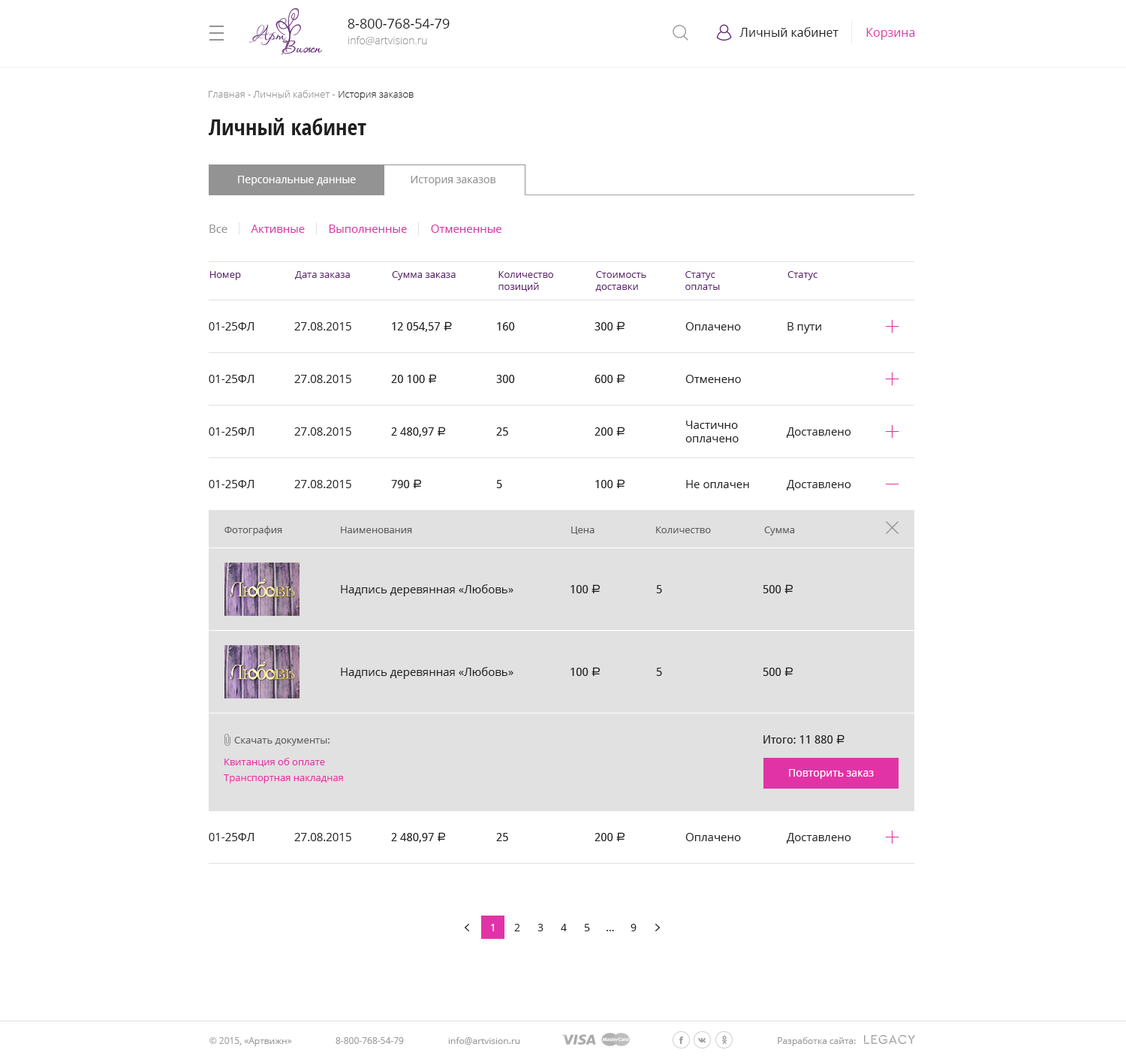
<style>
.page{position:relative;width:1126px;height:1059px;background:#ffffff}
.page>*{position:absolute;margin:0}
.t1{font:13.5px "OpenSans";color:#202020}
.t2{font:12px "OpenSans";color:#202020}
.t3{font:12px "OpenSans";color:#e233a6}
.t4{font:10.5px "OpenSans-Light";color:#999999}
.t5{font:9.8px "OpenSans-Light";color:#939393}
.t6{font:9.8px "OpenSans-Light";color:#202020}
.t7{font:22.5px "OpenSans-CondensedBold";color:#202020}
.t8{font:10.5px "OpenSans";color:#ffffff}
.t9{font:10.5px "OpenSans";color:#939393}
.t10{font:11.3px "OpenSans";color:#e233a6}
.t11{font:11.3px "OpenSans";color:#939393}
.t12{font:9.8px "OpenSans";color:#5e2670}
.t13{font:9.8px/12px "OpenSans";color:#5e2670}
.t14{font:11.3px "OpenSans";color:#202020}
.t15{font:11.3px "DroidSans";color:#202020}
.t16{font:12px "ALSRubl";color:#202020}
.t17{font:11.3px/13.5px "OpenSans";color:#202020}
.t18{font:9.8px "OpenSans";color:#5d5d5d}
.t19{font:9.8px "OpenSans";color:#e233a6}
.t20{font:10.5px "OpenSans";color:#202020}
.t21{font:9px "OpenSans";color:#9e9d9d}
</style>
<div class="page">
<p class="t1" style="left:348px;top:19px;width:102px;height:10px">8-800-768-54-79</p>
<p class="t2" style="left:740px;top:27px;width:99px;height:10px">Личный кабинет</p>
<p class="t3" style="left:866px;top:28px;width:49px;height:12px">Корзина</p>
<p class="t4" style="left:348px;top:36px;width:79px;height:9px">info@artvision.ru</p>
<p class="t5" style="left:209px;top:90px;width:205px;height:10px">Главная - Личный кабинет - <span class="t6">История заказов</span></p>
<p class="t7" style="left:209px;top:118px;width:157px;height:17px">Личный кабинет</p>
<p class="t8" style="left:238px;top:176px;width:118px;height:9px">Персональные данные</p>
<p class="t9" style="left:411px;top:176px;width:85px;height:9px">История заказов</p>
<p class="t10" style="left:209px;top:225px;width:293px;height:8px"><span class="t11">Все        </span>Активные        Выполненные        Отмененные</p>
<p class="t12" style="left:209px;top:271px;width:32px;height:9px">Номер</p>
<p class="t12" style="left:295px;top:271px;width:55px;height:8px">Дата заказа</p>
<p class="t12" style="left:392px;top:271px;width:64px;height:9px">Сумма заказа</p>
<p class="t13" style="left:499px;top:271px;width:54px;height:20px">Количество<br>позиций</p>
<p class="t13" style="left:595px;top:271px;width:51px;height:20px">Стоимость<br>доставки</p>
<p class="t13" style="left:686px;top:271px;width:34px;height:19px">Статус <br>оплаты</p>
<p class="t12" style="left:788px;top:271px;width:30px;height:9px">Статус</p>
<p class="t14" style="left:209px;top:322px;width:45px;height:8px">01-25ФЛ</p>
<p class="t14" style="left:294px;top:322px;width:57px;height:8px">27.08.2015</p>
<p class="t15" style="left:392px;top:321px;width:60px;height:11px">12 054,57 <span class="t16">a</span></p>
<p class="t15" style="left:497px;top:322px;width:18px;height:8px">160</p>
<p class="t15" style="left:595px;top:321px;width:30px;height:9px">300 <span class="t16">a</span></p>
<p class="t14" style="left:686px;top:322px;width:55px;height:8px">Оплачено</p>
<p class="t14" style="left:788px;top:322px;width:33px;height:11px">В пути</p>
<p class="t14" style="left:209px;top:375px;width:45px;height:8px">01-25ФЛ</p>
<p class="t14" style="left:294px;top:375px;width:57px;height:8px">27.08.2015</p>
<p class="t15" style="left:391px;top:374px;width:45px;height:9px">20 100 <span class="t16">a</span></p>
<p class="t15" style="left:496px;top:375px;width:19px;height:8px">300</p>
<p class="t15" style="left:595px;top:374px;width:30px;height:9px">600 <span class="t16">a</span></p>
<p class="t14" style="left:686px;top:375px;width:55px;height:8px">Отменено</p>
<p class="t17" style="left:686px;top:420px;width:53px;height:22px">Частично<br>оплачено</p>
<p class="t14" style="left:209px;top:427px;width:45px;height:9px">01-25ФЛ</p>
<p class="t14" style="left:294px;top:427px;width:57px;height:9px">27.08.2015</p>
<p class="t15" style="left:391px;top:426px;width:54px;height:11px">2 480,97 <span class="t16">a</span></p>
<p class="t15" style="left:496px;top:427px;width:12px;height:9px">25</p>
<p class="t15" style="left:595px;top:426px;width:30px;height:10px">200 <span class="t16">a</span></p>
<p class="t14" style="left:787px;top:427px;width:64px;height:11px">Доставлено</p>
<p class="t14" style="left:209px;top:480px;width:45px;height:8px">01-25ФЛ</p>
<p class="t14" style="left:294px;top:480px;width:57px;height:8px">27.08.2015</p>
<p class="t15" style="left:391px;top:479px;width:30px;height:9px">790 <span class="t16">a</span></p>
<p class="t15" style="left:496px;top:480px;width:6px;height:8px">5</p>
<p class="t15" style="left:595px;top:479px;width:30px;height:9px">100 <span class="t16">a</span></p>
<p class="t14" style="left:686px;top:480px;width:63px;height:8px">Не оплачен</p>
<p class="t14" style="left:787px;top:480px;width:64px;height:10px">Доставлено</p>
<p class="t18" style="left:225px;top:526px;width:57px;height:9px">Фотография</p>
<p class="t18" style="left:341px;top:526px;width:71px;height:7px">Наименования</p>
<p class="t18" style="left:571px;top:526px;width:24px;height:9px">Цена</p>
<p class="t18" style="left:656px;top:526px;width:55px;height:7px">Количество</p>
<p class="t18" style="left:764px;top:526px;width:31px;height:9px">Сумма</p>
<p class="t14" style="left:341px;top:584px;width:173px;height:12px">Надпись деревянная «Любовь»</p>
<p class="t15" style="left:571px;top:584px;width:29px;height:9px">100 <span class="t16">a</span></p>
<p class="t15" style="left:656px;top:585px;width:6px;height:8px">5</p>
<p class="t15" style="left:763px;top:584px;width:30px;height:9px">500 <span class="t16">a</span></p>
<p class="t14" style="left:341px;top:667px;width:173px;height:12px">Надпись деревянная «Любовь»</p>
<p class="t15" style="left:571px;top:667px;width:29px;height:9px">100 <span class="t16">a</span></p>
<p class="t15" style="left:656px;top:668px;width:6px;height:8px">5</p>
<p class="t15" style="left:763px;top:667px;width:30px;height:9px">500 <span class="t16">a</span></p>
<p class="t18" style="left:234px;top:737px;width:96px;height:9px">Скачать документы:</p>
<p class="t15" style="left:764px;top:734px;width:81px;height:9px">Итого: 11 880 <span class="t16">a</span></p>
<p class="t19" style="left:225px;top:758px;width:100px;height:9px">Квитанция об оплате</p>
<p class="t8" style="left:789px;top:769px;width:85px;height:10px">Повторить заказ</p>
<p class="t19" style="left:224px;top:774px;width:119px;height:9px">Транспортная накладная</p>
<p class="t14" style="left:209px;top:833px;width:45px;height:8px">01-25ФЛ</p>
<p class="t14" style="left:294px;top:833px;width:57px;height:8px">27.08.2015</p>
<p class="t15" style="left:391px;top:832px;width:54px;height:10px">2 480,97 <span class="t16">a</span></p>
<p class="t15" style="left:496px;top:833px;width:12px;height:8px">25</p>
<p class="t15" style="left:595px;top:832px;width:30px;height:9px">200 <span class="t16">a</span></p>
<p class="t14" style="left:686px;top:833px;width:55px;height:8px">Оплачено</p>
<p class="t14" style="left:787px;top:833px;width:64px;height:10px">Доставлено</p>
<p class="t8" style="left:491px;top:924px;width:3px;height:7px">1</p>
<p class="t20" style="left:514px;top:924px;width:6px;height:7px">2</p>
<p class="t20" style="left:538px;top:924px;width:6px;height:7px">3</p>
<p class="t20" style="left:561px;top:924px;width:6px;height:7px">4</p>
<p class="t20" style="left:584px;top:924px;width:6px;height:7px">5</p>
<p class="t20" style="left:607px;top:930px;width:7px;height:1px">...</p>
<p class="t20" style="left:631px;top:924px;width:6px;height:7px">9</p>
<p class="t21" style="left:209px;top:1037px;width:83px;height:9px">© 2015, «Артвижн»</p>
<p class="t21" style="left:336px;top:1037px;width:68px;height:7px">8-800-768-54-79</p>
<p class="t21" style="left:448px;top:1037px;width:72px;height:7px">info@artvision.ru</p>
<p class="t21" style="left:778px;top:1037px;width:78px;height:9px">Разработка сайта:</p>
</div>
